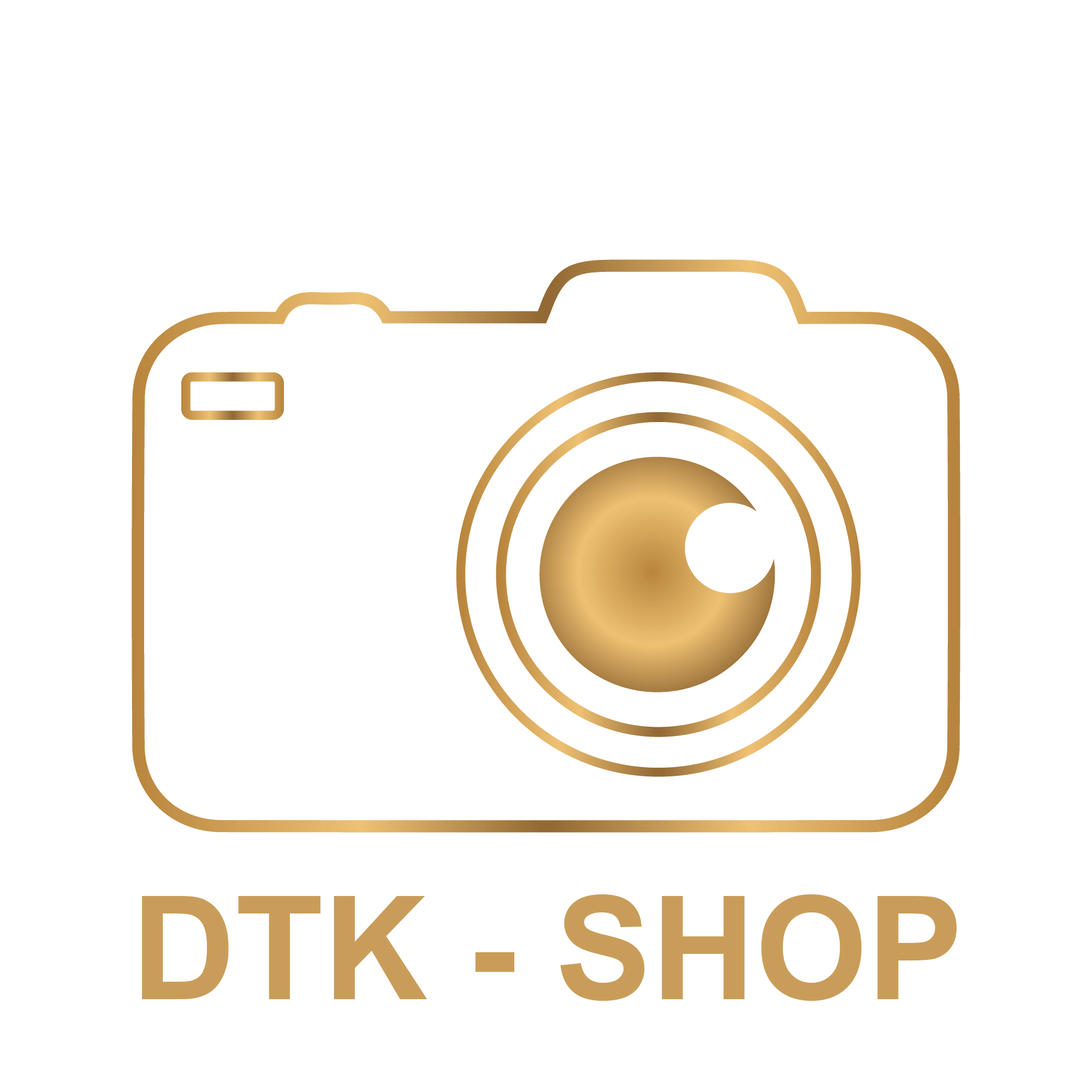
<style>
.page{position:relative;width:1092px;height:1092px;background:#ffffff}
.page>*{position:absolute;margin:0}
.t1{font:143.9px "Arial-BoldMT";color:#c99d59}
</style>
<div class="page">
<p class="t1" style="left:142px;top:894px;width:815px;height:107px">DTK - SHOP</p>
</div>
